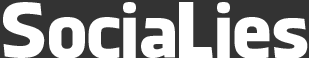
<style>
.page{position:relative;width:309px;height:58px;background:#333333}
.page>*{position:absolute;margin:0}
.t1{font:75px "FacebookLetterFaces";color:#ffffff}
</style>
<div class="page">
<p class="t1" style="left:3px;top:2px;width:305px;height:57px">SociaLies</p>
</div>
